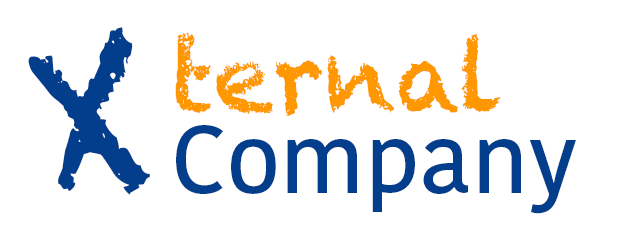
<style>
.page{position:relative;width:640px;height:250px;background:#ffffff}
.page>*{position:absolute;margin:0}
.t1{font:192px "Chalkduster";color:#033e8c}
.t2{font:96px "Chalkduster";color:#ff9700}
.t3{font:96px "KohinoorTelugu-Medium";color:#033e8c}
</style>
<div class="page">
<p class="t1" style="left:28px;top:27px;width:122px;height:168px;rotate:-8deg">X</p>
<p class="t2" style="left:175px;top:32px;width:326px;height:85px">ternal</p>
<p class="t3" style="left:176px;top:125px;width:400px;height:89px">Company</p>
</div>
